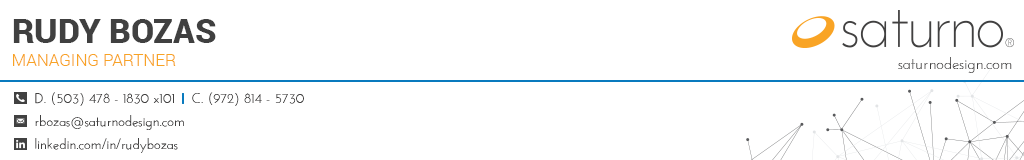
<style>
.page{position:relative;width:1024px;height:160px;background:#ffffff}
.page>*{position:absolute;margin:0}
.t1{font:33.6px "Roboto-Black";color:#404040;text-transform:uppercase}
.t2{font:16.8px "Roboto-Light";color:#f8a324;text-transform:uppercase}
.t3{font:16px "JosefinSans";color:#414040}
.t4{font:14px "JosefinSans";color:#414040}
</style>
<div class="page">
<p class="t1" style="left:13px;top:19px;width:203px;height:24px">Rudy Bozas</p>
<p class="t2" style="left:13px;top:54px;width:163px;height:12px">Managing Partner</p>
<p class="t3" style="left:898px;top:57px;width:114px;height:16px">saturnodesign.com</p>
<p class="t4" style="left:35px;top:92px;width:139px;height:14px">D. (503) 478 - 1830 x101</p>
<p class="t4" style="left:192px;top:92px;width:112px;height:14px">C. (972) 814 - 5730</p>
<p class="t4" style="left:35px;top:115px;width:149px;height:15px">rbozas@saturnodesign.com</p>
<p class="t4" style="left:35px;top:138px;width:143px;height:15px">linkedin.com/in/rudybozas</p>
</div>
